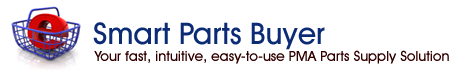
<style>
.page{position:relative;width:457px;height:75px;background:#ffffff}
.page>*{position:absolute;margin:0}
.t1{font:30px "AvantGardeITCbyBT-Medium";color:#0b2b75}
.t2{font:14px "AvantGardeITCbyBT-Medium";color:#330000}
</style>
<div class="page">
<p class="t1" style="left:93px;top:22px;width:232px;height:28px">Smart Parts Buyer</p>
<p class="t2" style="left:94px;top:50px;width:355px;height:14px">Your fast, intuitive, easy-to-use PMA Parts Supply Solution</p>
</div>
